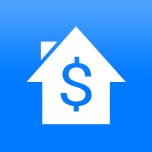
<style>
.page{position:relative;width:152px;height:152px;background:#007aff}
.page>*{position:absolute;margin:0}
.t1{font:59.3px "Roboto-Regular";color:#007aff;scale:1.15 1}
</style>
<div class="page">
<p class="t1" style="left:60px;top:56px;width:32px;height:56px">$</p>
</div>
